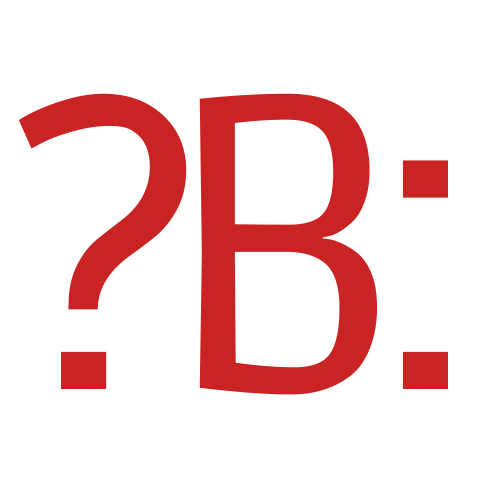
<style>
.page{position:relative;width:500px;height:500px;background:#ffffff}
.page>*{position:absolute;margin:0}
.t1{font:416.7px "Ruda-Regular";letter-spacing:-0.1em;color:#ca2323}
</style>
<div class="page">
<p class="t1" style="left:18px;top:93px;width:169px;height:296px">?</p>
<p class="t1" style="left:199px;top:93px;width:179px;height:302px">B</p>
<p class="t1" style="left:402px;top:160px;width:46px;height:229px">:</p>
</div>
